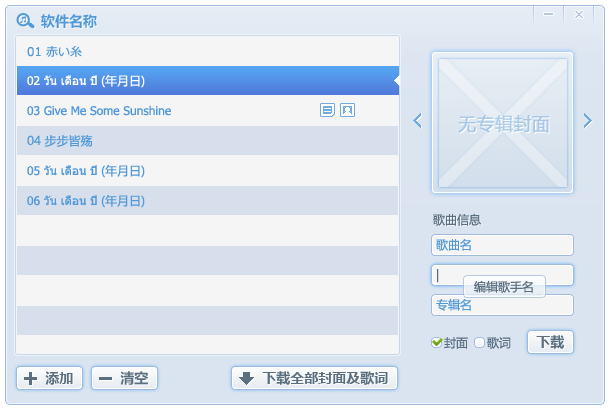
<style>
.page{position:relative;width:610px;height:410px;background:#f5f5f5}
.page>*{position:absolute;margin:0}
.t1{font:14px "MicrosoftYaHei-Bold";color:#5399d7}
.t2{font:12px "Meiryo";color:#5399d7}
.t3{font:12px "Tahoma";color:#ffffff}
.t4{font:12px "MicrosoftYaHei";color:#ffffff}
.t5{font:12px "Tahoma";color:#5399d7}
.t6{font:18px "MicrosoftYaHei";color:#a8c8e6;font-weight:bold}
.t7{font:12px "MicrosoftYaHei";color:#5399d7}
.t8{font:12px "MicrosoftYaHei";color:#5a6f80}
.t9{font:14px "MicrosoftYaHei-Bold";color:#5a6f80}
</style>
<div class="page">
<p class="t1" style="left:41px;top:14px;width:56px;height:14px">软件名称</p>
<p class="t2" style="left:27px;top:46px;width:55px;height:11px">01 赤い糸</p>
<p class="t3" style="left:27px;top:74px;width:118px;height:14px">02 วัน เดือน ปี<span class="t4"> (年月日)</span></p>
<p class="t5" style="left:27px;top:105px;width:144px;height:11px">03 Give Me Some Sunshine</p>
<p class="t6" style="left:458px;top:115px;width:92px;height:18px">无专辑封面</p>
<p class="t7" style="left:27px;top:135px;width:66px;height:12px">04 步步皆殇</p>
<p class="t5" style="left:27px;top:164px;width:118px;height:14px">05 วัน เดือน ปี<span class="t7"> (年月日)</span></p>
<p class="t5" style="left:27px;top:194px;width:118px;height:14px">06 วัน เดือน ปี<span class="t7"> (年月日)</span></p>
<p class="t8" style="left:433px;top:213px;width:48px;height:13px">歌曲信息</p>
<p class="t7" style="left:436px;top:239px;width:35px;height:12px">歌曲名</p>
<p class="t8" style="left:437px;top:269px;width:2px;height:14px">|</p>
<p class="t8" style="left:474px;top:280px;width:59px;height:13px">编辑歌手名</p>
<p class="t7" style="left:436px;top:298px;width:35px;height:13px">专辑名</p>
<p class="t8" style="left:444px;top:337px;width:24px;height:12px">封面</p>
<p class="t8" style="left:487px;top:337px;width:24px;height:12px">歌词</p>
<p class="t9" style="left:536px;top:335px;width:28px;height:14px">下载</p>
<p class="t9" style="left:45px;top:371px;width:28px;height:14px">添加</p>
<p class="t9" style="left:120px;top:371px;width:28px;height:14px">清空</p>
<p class="t9" style="left:262px;top:371px;width:126px;height:14px">下载全部封面及歌词</p>
</div>
